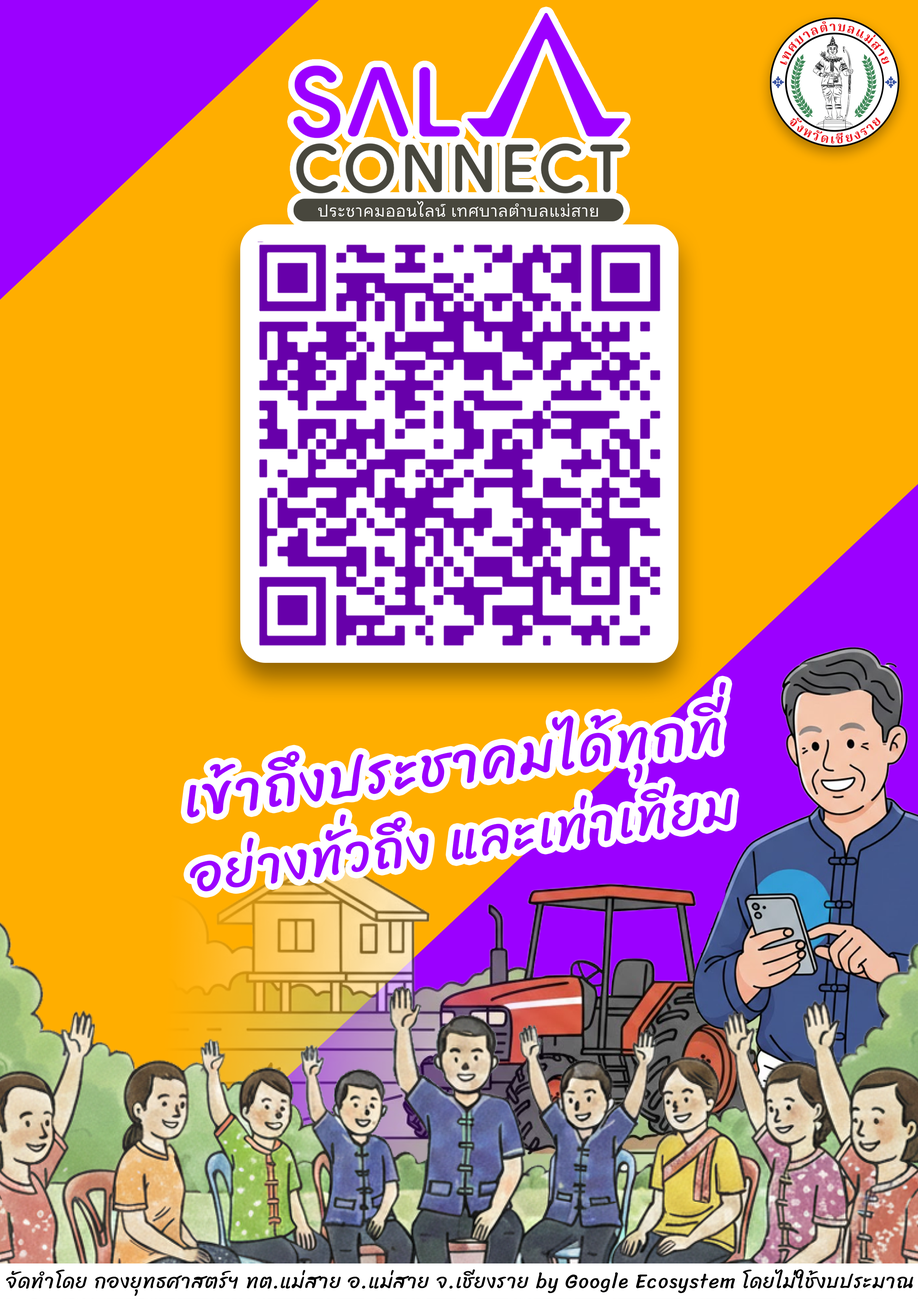
<style>
.page{position:relative;width:918px;height:1299px;background:#ffae00}
.page>*{position:absolute;margin:0}
.t1{font:52.1px/75.2px "Sriracha-Regular";letter-spacing:0.048em;color:#9b00ff}
.t2{font:56.2px/75.2px "Sriracha-Regular";letter-spacing:0.048em;color:#9b00ff}
.t3{font:19.9px "Sriracha-Regular";letter-spacing:0.048em;color:#000000}
</style>
<div class="page">
<p class="t1" style="left:187px;top:682px;width:546px;height:209px;text-align:center;rotate:-7deg"><span class="t2">เข้าถึงประชาคมได้ทุกที่<br></span>อย่างทั่วถึง และเท่าเทียม</p>
<p class="t3" style="left:6px;top:1269px;width:908px;height:27px">จัดทำโดย กองยุทธศาสตร์ฯ ทต.แม่สาย อ.แม่สาย จ.เชียงราย by Google Ecosystem โดยไม่ใช้งบประมาณ</p>
</div>
